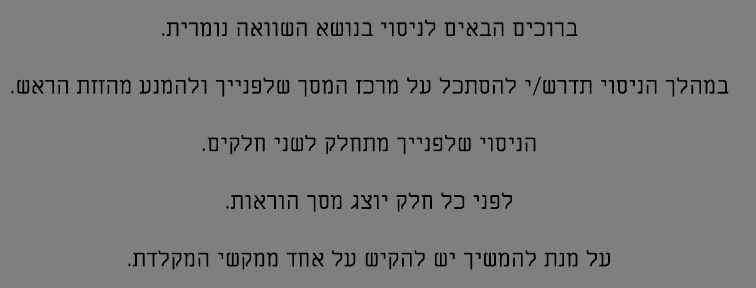
<style>
.page{position:relative;width:756px;height:288px;background:#807e80}
.page>*{position:absolute;margin:0}
.t1{font:24px "Miriam";color:#000000}
</style>
<div class="page">
<p class="t1" style="left:11px;top:19px;width:718px;height:251px;text-align:center">ברוכים הבאים לניסוי בנושא השוואה נומרית.<br><br>במהלך הניסוי תדרש/י להסתכל על מרכז המסך שלפנייך ולהמנע מהזזת הראש.<br><br>הניסוי שלפנייך מתחלק לשני חלקים.<br><br>לפני כל חלק יוצג מסך הוראות.<br><br>על מנת להמשיך יש להקיש על אחד ממקשי המקלדת.</p>
</div>
